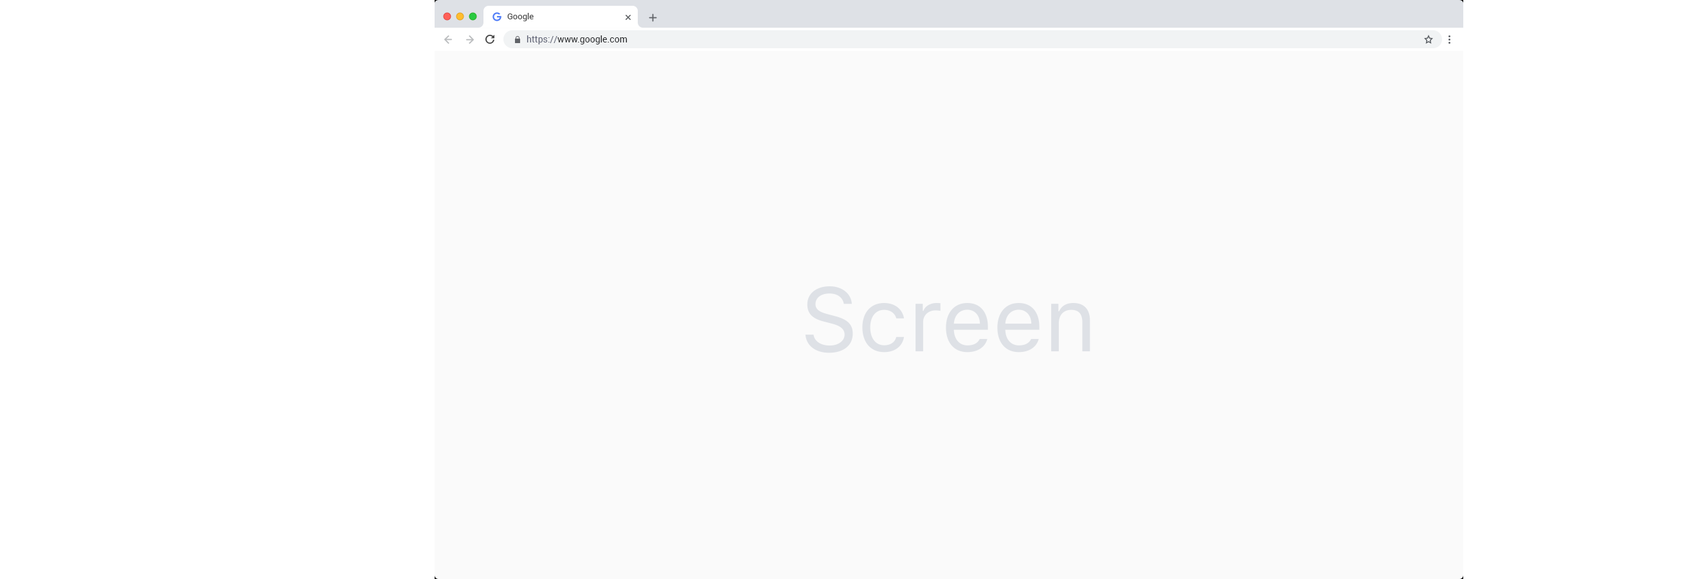
<style>
.page{position:relative;width:1687px;height:579px;background:#fafafa}
.page>*{position:absolute;margin:0}
.t1{font:8.4px "Roboto-Regular";color:#464646}
.t2{font:9px "Roboto-Regular";color:#202124}
.t3{font:9px "Roboto-Regular";color:#5f6375}
.t4{font:90px "SFProText-Regular";color:#dee1e6}
</style>
<div class="page">
<p class="t1" style="left:507px;top:13px;width:27px;height:8px">Google</p>
<p class="t2" style="left:526px;top:35px;width:101px;height:9px"><span class="t3">https://</span>www.google.com</p>
<p class="t4" style="left:805px;top:286px;width:285px;height:67px">Screen</p>
</div>
